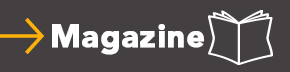
<style>
.page{position:relative;width:290px;height:72px;background:#444041}
.page>*{position:absolute;margin:0}
.t1{font:32px "Avenir-Black";letter-spacing:0.01em;color:#ffffff;font-weight:bold}
</style>
<div class="page">
<p class="t1" style="left:52px;top:24px;width:152px;height:31px">Magazine</p>
</div>
